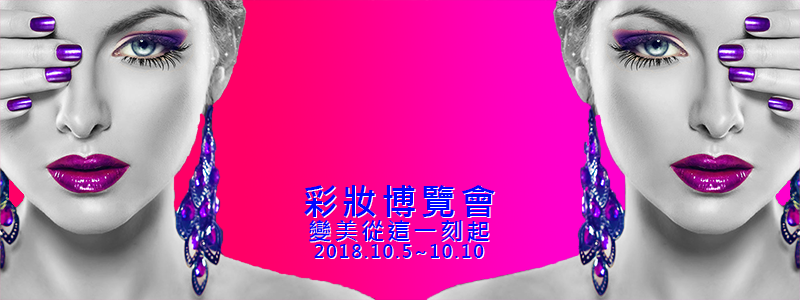
<style>
.page{position:relative;width:800px;height:300px}
.page>*{position:absolute;margin:0}
.t1{font:18px/24px "MicrosoftJhengHeiBold";letter-spacing:0.1em;color:#0006ff}
.t2{font:36px/36px "MicrosoftJhengHeiBold";letter-spacing:0.1em;color:#0006ff}
.t3{font:24px/24px "MicrosoftJhengHeiBold";letter-spacing:0.1em;color:#0006ff}
.t4{font:18px/24px "MicrosoftJhengHeiBold";letter-spacing:0.1em}
.t5{font:36px/36px "MicrosoftJhengHeiBold";letter-spacing:0.1em}
.t6{font:24px/24px "MicrosoftJhengHeiBold";letter-spacing:0.1em}
</style>
<div class="page">
<p class="t1" style="left:304px;top:185px;width:191px;height:73px;text-align:center"><span class="t2">彩妝博覽會<br></span><span class="t3">變美從這一刻起<br></span>2018.10.5~10.10</p>
<p class="t4" style="left:305px;top:186px;width:191px;height:73px;text-align:center"><span class="t5">彩妝博覽會<br></span><span class="t6">變美從這一刻起<br></span>2018.10.5~10.10</p>
</div>
